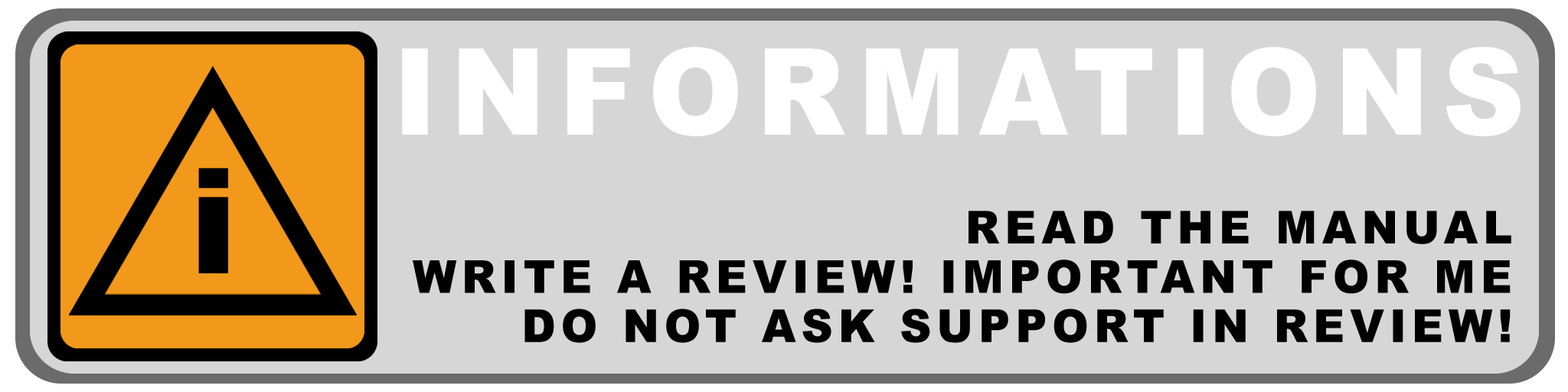
<style>
.page{position:relative;width:1568px;height:392px;background:#d6d6d6}
.page>*{position:absolute;margin:0}
.t1{font:119.8px "Arial-Black";letter-spacing:0.12em;color:#ffffff;scale:0.95 1}
.t2{font:146.8px "Arial-Black";letter-spacing:0.12em;color:#000000}
.t3{font:45.5px "Arial-Black";letter-spacing:0.12em;color:#000000;scale:0.96 1}
</style>
<div class="page">
<p class="t1" style="left:402px;top:47px;width:1119px;height:89px">INFORMATIONS</p>
<p class="t2" style="left:198px;top:168px;width:30px;height:105px">i</p>
<p class="t3" style="left:969px;top:211px;width:542px;height:33px">READ THE MANUAL</p>
<p class="t3" style="left:413px;top:260px;width:1098px;height:34px">WRITE A REVIEW! IMPORTANT FOR ME</p>
<p class="t3" style="left:524px;top:309px;width:987px;height:34px">DO NOT ASK SUPPORT IN REVIEW!</p>
</div>
